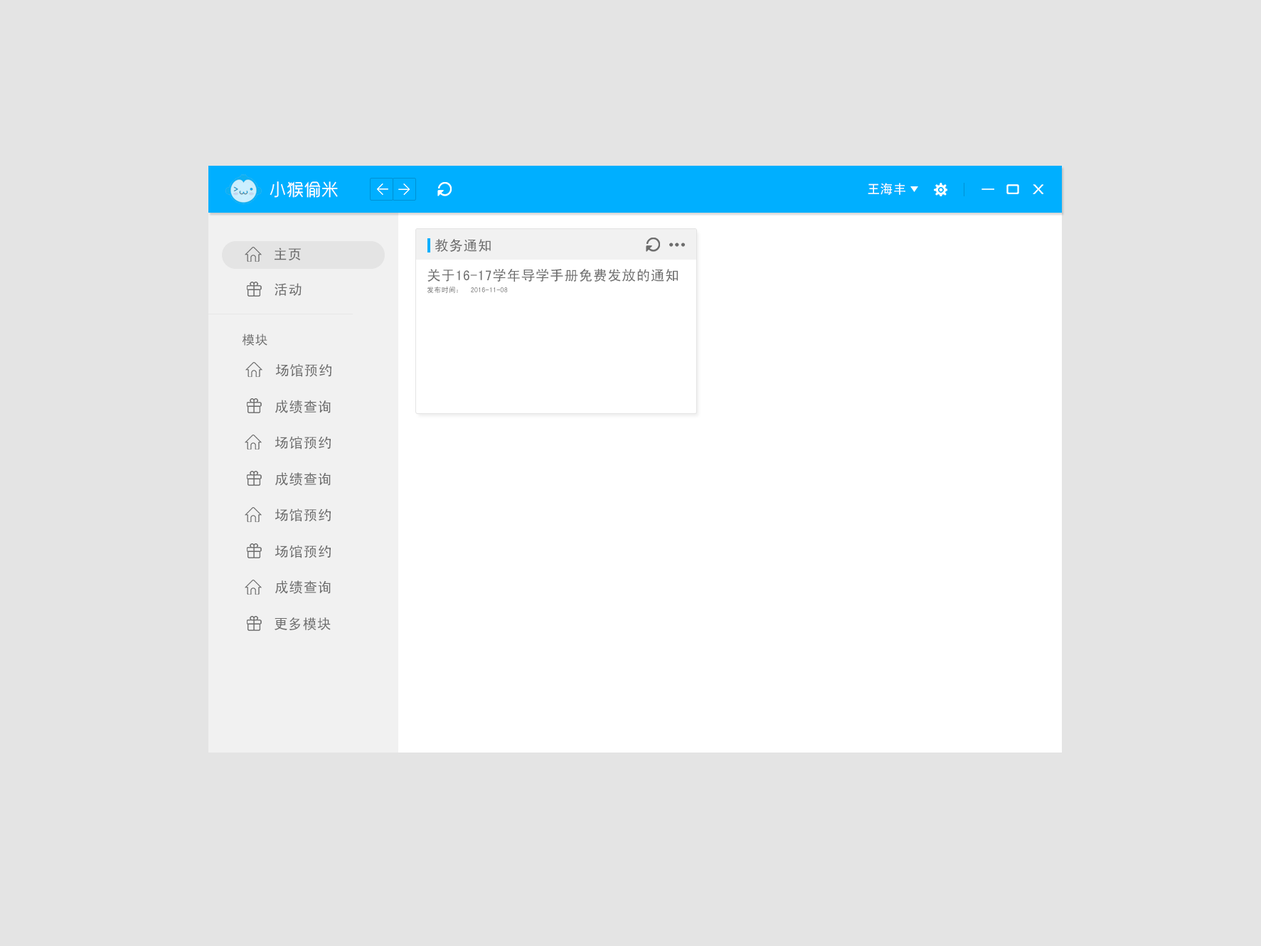
<style>
.page{position:relative;width:1261px;height:946px;background:#e4e4e4}
.page>*{position:absolute;margin:0}
.t1{font:17.1px "RTWSYueGoTrial-Regular";letter-spacing:0.02em;color:#ffffff}
.t2{font:12.8px "SimHei";letter-spacing:0.02em;color:#ffffff}
.t3{font:14.1px "SimHei";letter-spacing:0.02em;color:#6d6d6d}
.t4{font:7.1px "SimHei";letter-spacing:0.02em;color:#6d6d6d}
.t5{font:12.8px "SimHei";letter-spacing:0.02em;color:#6d6d6d}
</style>
<div class="page">
<p class="t1" style="left:270px;top:181px;width:68px;height:17px">小猴偷米</p>
<p class="t2" style="left:868px;top:183px;width:37px;height:12px">王海丰</p>
<p class="t3" style="left:434px;top:239px;width:57px;height:13px">教务通知</p>
<p class="t3" style="left:274px;top:247px;width:27px;height:14px">主页</p>
<p class="t3" style="left:427px;top:269px;width:251px;height:13px">关于16-17学年导学手册免费发放的通知</p>
<p class="t3" style="left:274px;top:283px;width:28px;height:13px">活动</p>
<p class="t4" style="left:427px;top:286px;width:81px;height:7px">发布时间：  2016-11-08</p>
<p class="t5" style="left:242px;top:334px;width:25px;height:12px">模块</p>
<p class="t3" style="left:275px;top:363px;width:56px;height:14px">场馆预约</p>
<p class="t3" style="left:275px;top:400px;width:56px;height:13px">成绩查询</p>
<p class="t3" style="left:274px;top:436px;width:57px;height:13px">场馆预约</p>
<p class="t3" style="left:275px;top:472px;width:56px;height:14px">成绩查询</p>
<p class="t3" style="left:274px;top:508px;width:57px;height:14px">场馆预约</p>
<p class="t3" style="left:274px;top:545px;width:57px;height:13px">场馆预约</p>
<p class="t3" style="left:275px;top:580px;width:56px;height:14px">成绩查询</p>
<p class="t3" style="left:274px;top:617px;width:57px;height:13px">更多模块</p>
</div>
